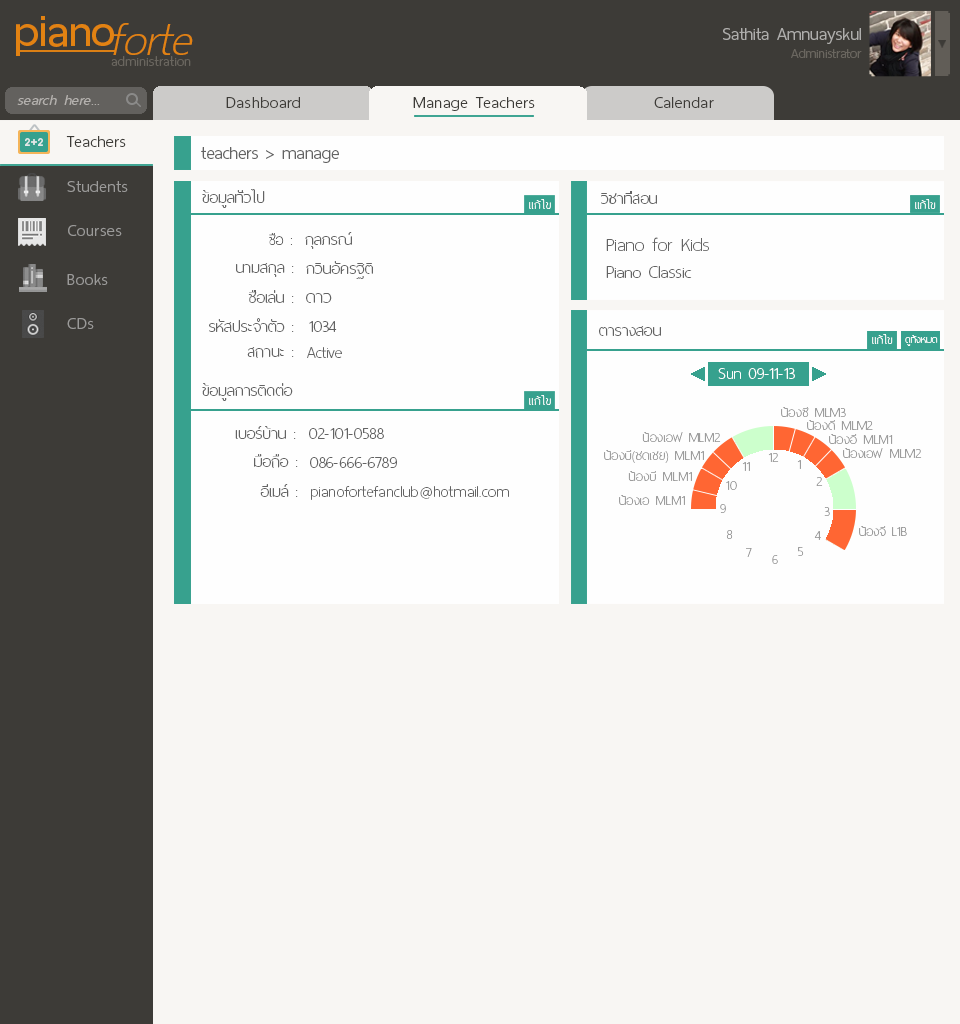
<style>
.page{position:relative;width:960px;height:1024px;background:#f8f6f3}
.page>*{position:absolute;margin:0}
.t1{font:60px "ThaiSansNeue-SemiBold";letter-spacing:-0.005em;color:#e28212}
.t2{font:62px "ThaiSansNeue-ExtraLightItalic";letter-spacing:-0.005em;color:#e28212}
.t3{font:24px "ThaiSansNeue-Light";letter-spacing:-0.005em;color:#afaeac}
.t4{font:18px "ThaiSansNeue-Light";letter-spacing:-0.005em;color:#6a665f}
.t5{font:18.5px "ThaiSansNeue-ExtraLight";letter-spacing:0.025em;color:#6a665f}
.t6{font:20px "ThaiSansNeue-LightItalic";letter-spacing:0.025em;color:#b4b1ae}
.t7{font:22px "ThaiSansNeue-Light";letter-spacing:0.025em;color:#3d3b37}
.t8{font:24px "ThaiSansNeue-Light";letter-spacing:-0.005em;color:#636363}
.t9{font:22px "ThaiSansNeue-Light";letter-spacing:0.025em;color:#9b9a99}
.t10{font:22px "ThaiSansNeue-UltraLight";color:#636363}
.t11{font:16px "ThaiSansNeue-UltraLight";letter-spacing:0.025em;color:#fefefe}
.t12{font:16px "ThaiSansNeue-UltraLight";color:#fefefe}
.t13{font:20px "ThaiSansNeue-UltraLight";color:#636363}
.t14{font:26px "ThaiSansNeue-UltraLight";color:#636363}
.t15{font:24px "ThaiSansNeue-UltraLight";color:#636363}
.t16{font:14px "ThaiSansNeue-UltraLight";color:#fefefe}
.t17{font:22px "ThaiSansNeue-UltraLight";color:#fefefe}
.t18{font:18px "ThaiSansNeue-UltraLight";letter-spacing:0.01em;color:#9d9d9d}
.t19{font:22px "ThaiSansNeue-UltraLight";letter-spacing:0.01em;color:#636363}
.t20{font:18px "ThaiSansNeue-UltraLight";color:#9d9d9d}
</style>
<div class="page">
<p class="t1" style="left:16px;top:16px;width:98px;height:40px">piano</p>
<p class="t2" style="left:113px;top:23px;width:80px;height:32px">forte</p>
<p class="t3" style="left:723px;top:28px;width:138px;height:16px">Sathita Amnuayskul</p>
<p class="t4" style="left:791px;top:49px;width:71px;height:9px">Administrator</p>
<p class="t5" style="left:111px;top:56px;width:80px;height:10px">administration</p>
<p class="t6" style="left:17px;top:95px;width:83px;height:10px">search here...</p>
<p class="t7" style="left:226px;top:97px;width:74px;height:11px">Dashboard</p>
<p class="t7" style="left:413px;top:97px;width:122px;height:14px">Manage Teachers</p>
<p class="t7" style="left:654px;top:97px;width:60px;height:11px">Calendar</p>
<p class="t7" style="left:66px;top:136px;width:60px;height:11px">Teachers</p>
<p class="t8" style="left:201px;top:147px;width:138px;height:16px">teachers &gt; manage</p>
<p class="t9" style="left:67px;top:181px;width:61px;height:11px">Students</p>
<p class="t10" style="left:202px;top:189px;width:63px;height:19px">ข้อมูลทั่วไป</p>
<p class="t10" style="left:601px;top:191px;width:56px;height:13px">วิชาที่สอน</p>
<p class="t11" style="left:529px;top:199px;width:22px;height:10px">แก้ไข</p>
<p class="t12" style="left:915px;top:199px;width:21px;height:10px">แก้ไข</p>
<p class="t9" style="left:68px;top:225px;width:54px;height:11px">Courses</p>
<p class="t13" style="left:269px;top:233px;width:23px;height:12px">ชื่อ :</p>
<p class="t10" style="left:305px;top:232px;width:47px;height:17px">กุลภรณ์</p>
<p class="t14" style="left:606px;top:237px;width:103px;height:14px">Piano for Kids</p>
<p class="t10" style="left:236px;top:263px;width:58px;height:14px">นามสกุล :</p>
<p class="t10" style="left:306px;top:261px;width:67px;height:18px">กวินอัครฐิติ</p>
<p class="t15" style="left:606px;top:266px;width:86px;height:12px">Piano Classic</p>
<p class="t9" style="left:67px;top:274px;width:41px;height:11px">Books</p>
<p class="t10" style="left:248px;top:290px;width:46px;height:13px">ชื่อเล่น :</p>
<p class="t15" style="left:306px;top:293px;width:26px;height:10px">ดาว</p>
<p class="t9" style="left:67px;top:318px;width:27px;height:11px">CDs</p>
<p class="t10" style="left:209px;top:318px;width:85px;height:14px">รหัสประจำตัว :</p>
<p class="t10" style="left:309px;top:321px;width:28px;height:11px">1034</p>
<p class="t10" style="left:599px;top:326px;width:62px;height:10px">ตารางสอน</p>
<p class="t12" style="left:872px;top:334px;width:21px;height:10px">แก้ไข</p>
<p class="t16" style="left:905px;top:335px;width:33px;height:11px">ดูทั้งหมด</p>
<p class="t10" style="left:247px;top:347px;width:47px;height:11px">สถานะ :</p>
<p class="t10" style="left:307px;top:347px;width:35px;height:11px">Active</p>
<p class="t17" style="left:718px;top:368px;width:77px;height:11px">Sun 09-11-13</p>
<p class="t10" style="left:202px;top:383px;width:91px;height:18px">ข้อมูลการติดต่อ</p>
<p class="t11" style="left:529px;top:395px;width:22px;height:10px">แก้ไข</p>
<p class="t18" style="left:781px;top:407px;width:65px;height:10px">น้องซี MLM3</p>
<p class="t18" style="left:807px;top:420px;width:66px;height:10px">น้องดี MLM2</p>
<p class="t10" style="left:235px;top:426px;width:61px;height:13px">เบอร์บ้าน :</p>
<p class="t19" style="left:309px;top:428px;width:75px;height:11px">02-101-0588</p>
<p class="t18" style="left:642px;top:432px;width:79px;height:10px">น้องเอฟ MLM2</p>
<p class="t18" style="left:829px;top:434px;width:64px;height:10px">น้องอี MLM1</p>
<p class="t18" style="left:843px;top:448px;width:79px;height:10px">น้องเอฟ MLM2</p>
<p class="t10" style="left:254px;top:454px;width:44px;height:14px">มือถือ :</p>
<p class="t19" style="left:310px;top:457px;width:87px;height:11px">086-666-6789</p>
<p class="t18" style="left:604px;top:450px;width:100px;height:13px">น้องบี(ชดเชย) MLM1</p>
<p class="t18" style="left:742px;top:462px;width:8px;height:9px">11</p>
<p class="t18" style="left:768px;top:453px;width:11px;height:9px">12</p>
<p class="t18" style="left:797px;top:460px;width:4px;height:9px">1</p>
<p class="t18" style="left:628px;top:471px;width:64px;height:10px">น้องบี MLM1</p>
<p class="t10" style="left:260px;top:484px;width:38px;height:13px">อีเมล์ :</p>
<p class="t19" style="left:311px;top:486px;width:198px;height:14px">pianofortefanclub@hotmail.com</p>
<p class="t18" style="left:726px;top:481px;width:11px;height:9px">10</p>
<p class="t18" style="left:816px;top:477px;width:7px;height:9px">2</p>
<p class="t18" style="left:619px;top:495px;width:66px;height:10px">น้องเอ MLM1</p>
<p class="t20" style="left:720px;top:504px;width:6px;height:9px">9</p>
<p class="t18" style="left:824px;top:507px;width:6px;height:9px">3</p>
<p class="t18" style="left:726px;top:530px;width:7px;height:9px">8</p>
<p class="t18" style="left:814px;top:531px;width:7px;height:9px">4</p>
<p class="t20" style="left:859px;top:526px;width:48px;height:10px">น้องจี L1B</p>
<p class="t18" style="left:746px;top:548px;width:6px;height:9px">7</p>
<p class="t18" style="left:772px;top:555px;width:6px;height:9px">6</p>
<p class="t18" style="left:798px;top:547px;width:6px;height:9px">5</p>
</div>
